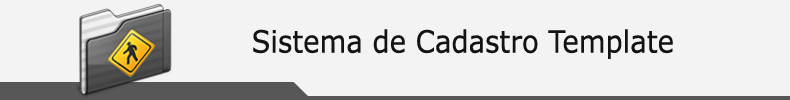
<style>
.page{position:relative;width:790px;height:100px;background:#f3f3f3}
.page>*{position:absolute;margin:0}
.t1{font:30.8px "Verdana";color:#131313;scale:0.89 1}
</style>
<div class="page">
<p class="t1" style="left:253px;top:29px;width:420px;height:30px">Sistema de Cadastro Template</p>
</div>
